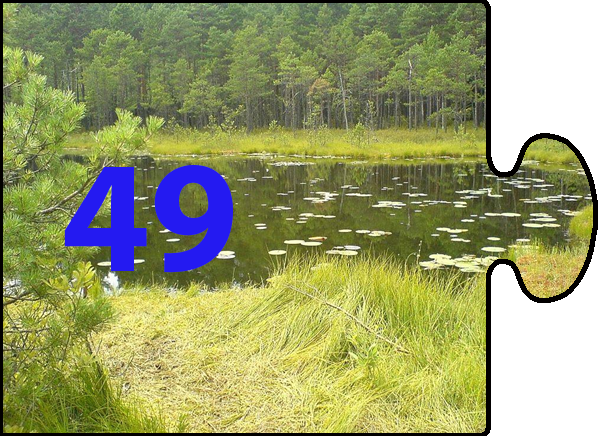
<style>
.page{position:relative;width:604px;height:436px}
.page>*{position:absolute;margin:0}
.t1{font:160px "MyriadPro-Bold";color:#241af1}
</style>
<div class="page">
<p class="t1" style="left:64px;top:165px;width:169px;height:108px">49</p>
</div>
